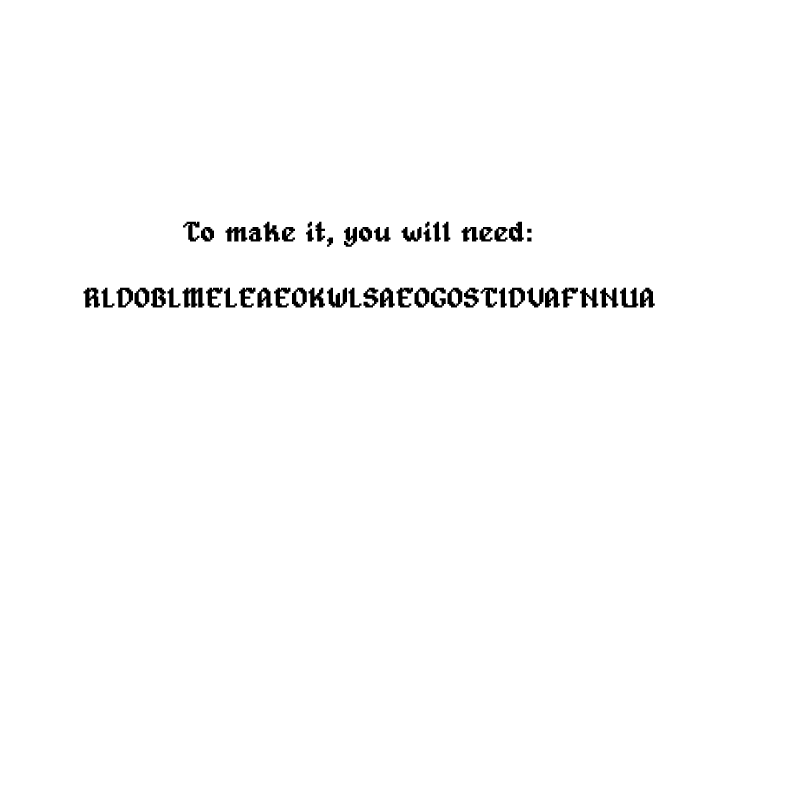
<style>
.page{position:relative;width:800px;height:800px;background:#ffffff}
.page>*{position:absolute;margin:0}
.t1{font:27.9px "Alagard";color:#000000;font-weight:bold}
</style>
<div class="page">
<p class="t1" style="left:83px;top:221px;width:572px;height:87px">To make it, you will need: <br><br>RLDOBLMELEAEOKWLSAEOGOSTIDVAFNNUA</p>
</div>
